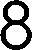
<style>
.page{position:relative;width:32px;height:50px;background:#ffffff}
.page>*{position:absolute;margin:0}
.t1{font:66.7px "Tuffy";color:#000000}
</style>
<div class="page">
<p class="t1" style="left:0px;top:0px;width:32px;height:50px">8</p>
</div>
